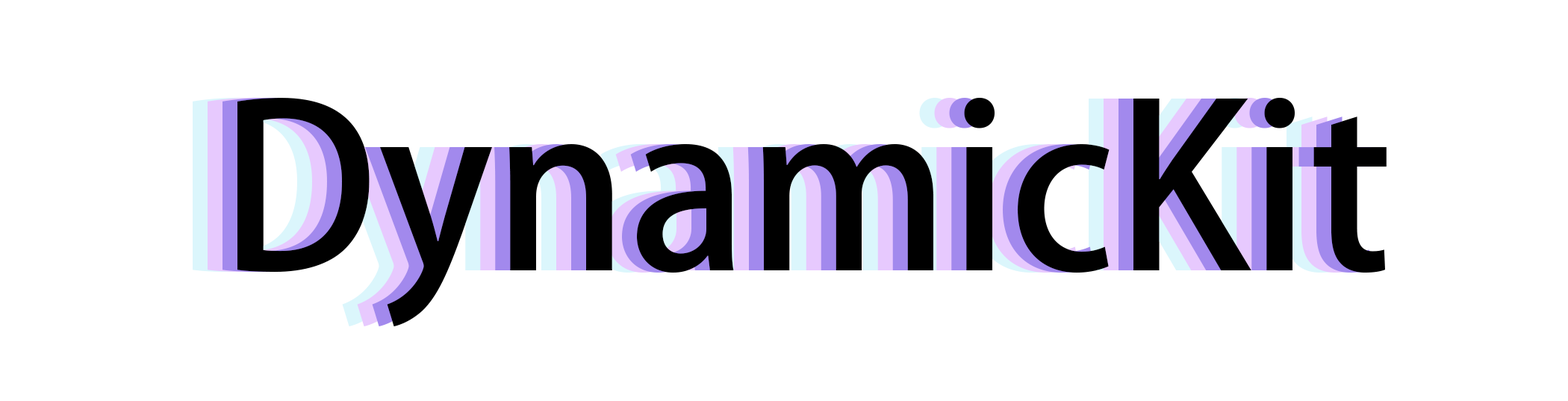
<style>
.page{position:relative;width:1568px;height:401px;background:#ffffff}
.page>*{position:absolute;margin:0}
.t1{font:224px "AdobeHeitiStd-Regular"}
.t2{font:224px "AdobeHeitiStd-Regular";color:#000000}
</style>
<div class="page">
<p class="t1" style="left:223px;top:98px;width:1149px;height:229px">DynamicKit</p>
<p class="t2" style="left:237px;top:98px;width:1150px;height:229px">DynamicKit</p>
</div>
